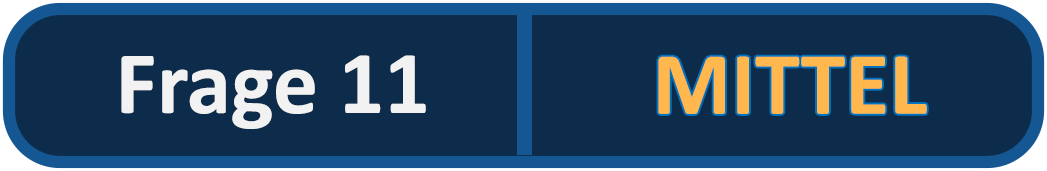
<style>
.page{position:relative;width:1047px;height:171px;background:#0d2c4b}
.page>*{position:absolute;margin:0}
.t1{font:90px "Calibri-Bold";color:#f2f2f2}
.t2{font:90px "Calibri-Bold";color:#ffb74e}
</style>
<div class="page">
<p class="t1" style="left:121px;top:55px;width:305px;height:74px">Frage 11</p>
<p class="t2" style="left:658px;top:56px;width:269px;height:58px">MITTEL</p>
</div>
